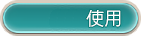
<style>
.page{position:relative;width:141px;height:36px}
.page>*{position:absolute;margin:0}
.t1{font:18px "GothicMB101Pr6N-Light";color:#ffffff}
</style>
<div class="page">
<p class="t1" style="left:86px;top:10px;width:35px;height:17px">使用</p>
</div>
